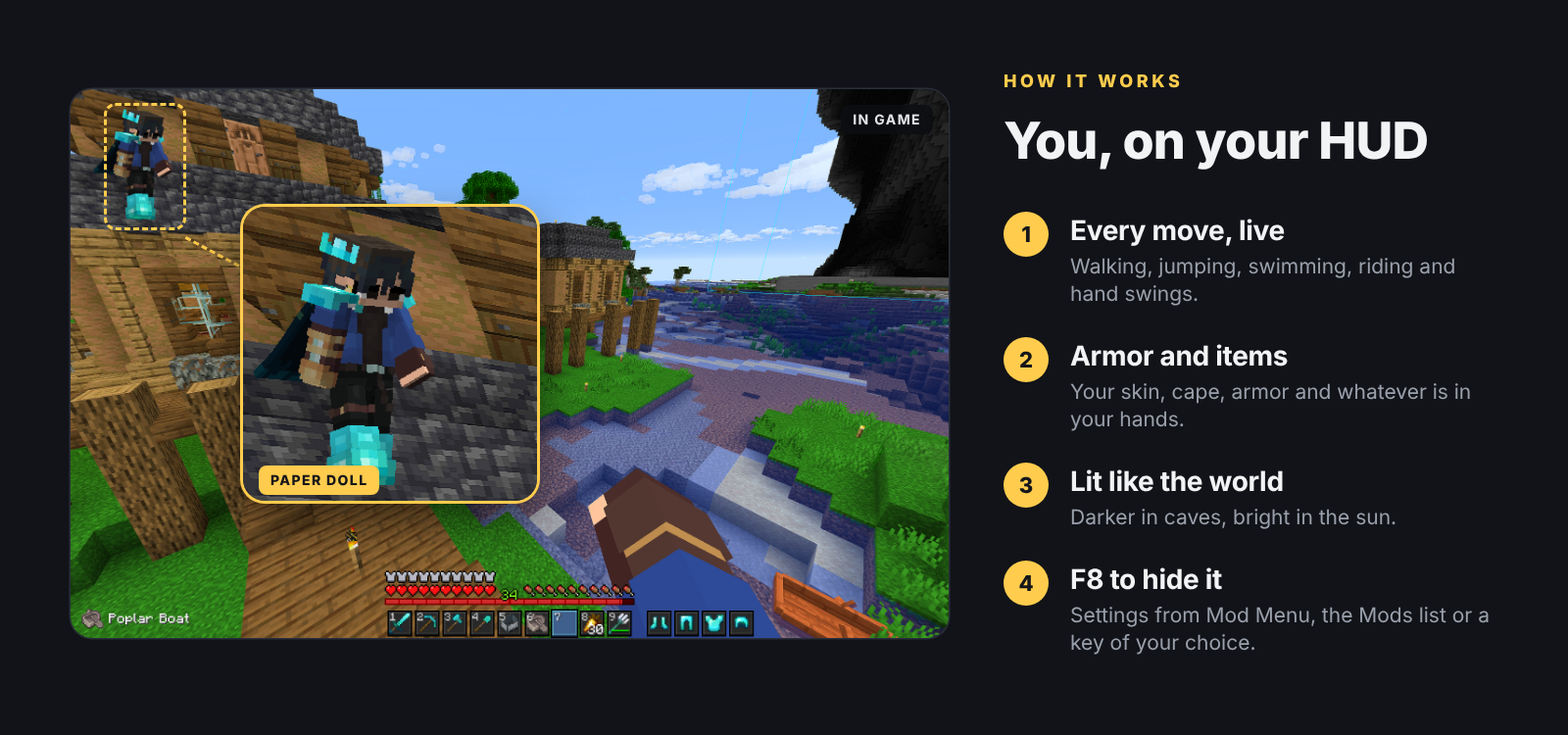
<style>
.page{position:relative;width:1568px;height:735px;background:#111318}
.page>*{position:absolute;margin:0}
.t1{font:17.6px "Inter-ExtraBold";letter-spacing:0.2em;color:#ffcc4d}
.t2{font:13.7px "Inter-Bold";letter-spacing:0.1em;color:#e3e5ea}
.t3{font:51px "Inter-ExtraBold";letter-spacing:-0.015em;color:#f2f3f5}
.t4{font:27.4px "Inter-Bold";letter-spacing:-0.011em;color:#f2f3f5}
.t5{font:21.6px "Inter-ExtraBold";color:#15161a}
.t6{font:20.6px/27.4px "Inter-Regular";color:#9aa0ab}
.t7{font:20.6px "Inter-Regular";color:#9aa0ab}
</style>
<div class="page">
<p class="t1" style="left:1004px;top:74px;width:176px;height:14px">HOW IT WORKS</p>
<p class="t2" style="left:841px;top:105px;width:92px;height:29px">IN GAME</p>
<p class="t3" style="left:1004px;top:122px;width:423px;height:48px">You, on your HUD</p>
<p class="t4" style="left:1071px;top:219px;width:214px;height:27px">Every move, live</p>
<p class="t5" style="left:1022px;top:226px;width:8px;height:16px">1</p>
<p class="t6" style="left:1070px;top:258px;width:384px;height:48px">Walking, jumping, swimming, riding and hand swings.</p>
<p class="t5" style="left:1019px;top:351px;width:13px;height:17px">2</p>
<p class="t4" style="left:1070px;top:344px;width:218px;height:23px">Armor and items</p>
<p class="t6" style="left:1070px;top:383px;width:400px;height:48px">Your skin, cape, armor and whatever is in your hands.</p>
<p class="t4" style="left:1071px;top:469px;width:212px;height:23px">Lit like the world</p>
<p class="t5" style="left:1019px;top:476px;width:14px;height:18px">3</p>
<p class="t7" style="left:1071px;top:509px;width:325px;height:20px">Darker in caves, bright in the sun.</p>
<p class="t4" style="left:1071px;top:567px;width:151px;height:23px">F8 to hide it</p>
<p class="t5" style="left:1019px;top:575px;width:14px;height:16px">4</p>
<p class="t6" style="left:1071px;top:607px;width:418px;height:48px">Settings from Mod Menu, the Mods list or a key of your choice.</p>
</div>
